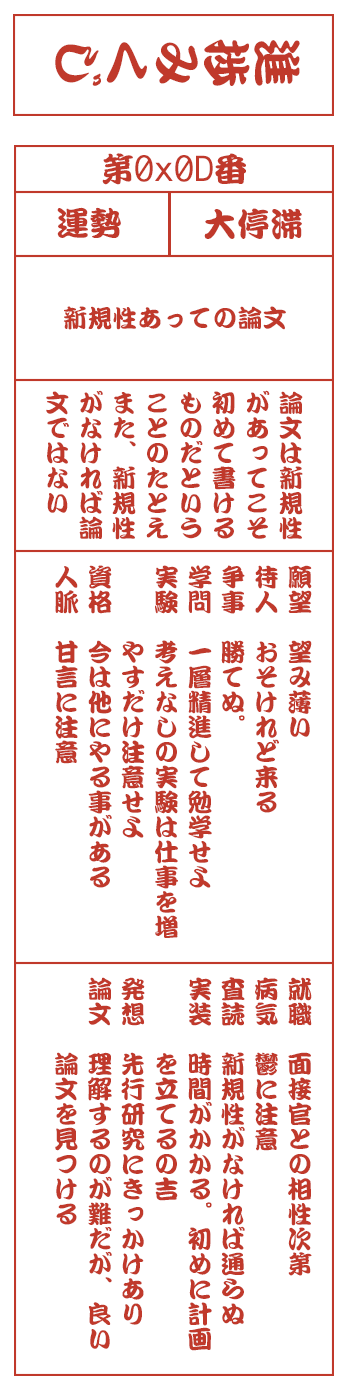
<style>
.page{position:relative;width:350px;height:1400px;background:#ffffff}
.page>*{position:absolute;margin:0}
.t1{font:50px "DFKanTeiRyu-XB-MP-RKSJ-H";color:#c0392b}
.t2{font:33.3px "Monaco";color:#c0392b}
.t3{font:33.3px "DFKanTeiRyu-XB-MP-RKSJ-H";color:#c0392b}
.t4{font:25px "DFKanTeiRyu-XB-MP-RKSJ-H";color:#c0392b}
.t5{font:25px/33.3px "DFKanTeiRyu-XB-MP-RKSJ-H";color:#c0392b}
</style>
<div class="page">
<p class="t1" style="left:55px;top:39px;width:245px;height:47px;rotate:90deg">進捗みくじ</p>
<p class="t2" style="left:102px;top:153px;width:144px;height:32px"><span class="t3">第</span>0x0D<span class="t3">番</span></p>
<p class="t3" style="left:57px;top:207px;width:64px;height:31px">運勢</p>
<p class="t3" style="left:204px;top:208px;width:98px;height:32px">大停滞</p>
<p class="t4" style="left:63px;top:306px;width:223px;height:24px">新規性あっての論文</p>
<p class="t5" style="left:46px;top:390px;width:257px;height:150px">論文は新規性<br>があってこそ<br>初めて書ける<br>ものだという<br>ことのたとえ<br>また、新規性<br>がなければ論<br>文ではない</p>
<p class="t5" style="left:55px;top:565px;width:257px;height:373px">願望　望み薄い<br>待人　おそけれど来る<br>争事　勝てぬ。<br>学問　一層精進して勉学せよ<br>実験　考えなしの実験は仕事を増<br>　　　やすだけ注意せよ<br>資格　今は他にやる事がある<br>人脈　甘言に注意</p>
<p class="t5" style="left:55px;top:977px;width:257px;height:374px">就職　面接官との相性次第<br>病気　鬱に注意<br>査読　新規性がなければ通らぬ<br>実装　時間がかかる。初めに計画<br>　　　を立てるの吉<br>発想　先行研究にきっかけあり<br>論文　理解するのが難だが、良い<br>　　　論文を見つける</p>
</div>
